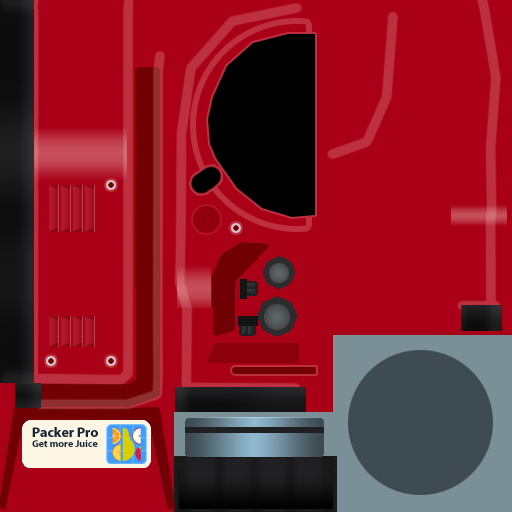
<style>
.page{position:relative;width:512px;height:512px;background:#a90018}
.page>*{position:absolute;margin:0}
.t1{font:14px "MyriadPro-Bold";color:#031323}
.t2{font:10px "MyriadPro-Bold";color:#031323}
</style>
<div class="page">
<p class="t1" style="left:32px;top:427px;width:66px;height:10px;opacity:0.92">Packer Pro</p>
<p class="t2" style="left:32px;top:440px;width:66px;height:7px;opacity:0.92">Get more Juice</p>
</div>
